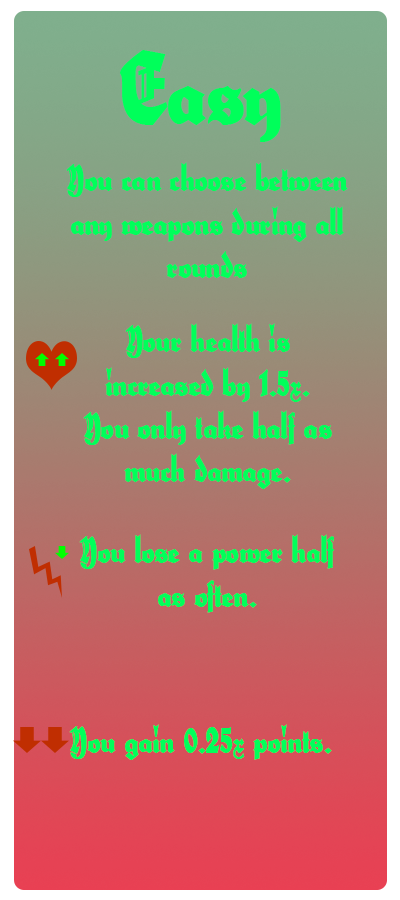
<style>
.page{position:relative;width:400px;height:900px}
.page>*{position:absolute;margin:0}
.t1{font:100px "HerzogVonGraf";color:#00ff5a}
.t2{font:36px "HerzogVonGraf";color:#00ff5a}
</style>
<div class="page">
<p class="t1" style="left:120px;top:50px;width:161px;height:92px">Easy</p>
<p class="t2" style="left:66px;top:162px;width:282px;height:116px;text-align:center">You can choose between any weapons during all rounds</p>
<p class="t2" style="left:83px;top:323px;width:249px;height:166px;text-align:center">Your health is increased by 1.5x.<br>You only take half as much damage.</p>
<p class="t2" style="left:79px;top:534px;width:255px;height:79px;text-align:center">You lose a power half as often.</p>
<p class="t2" style="left:69px;top:724px;width:263px;height:36px">You gain 0.25x points.</p>
</div>
